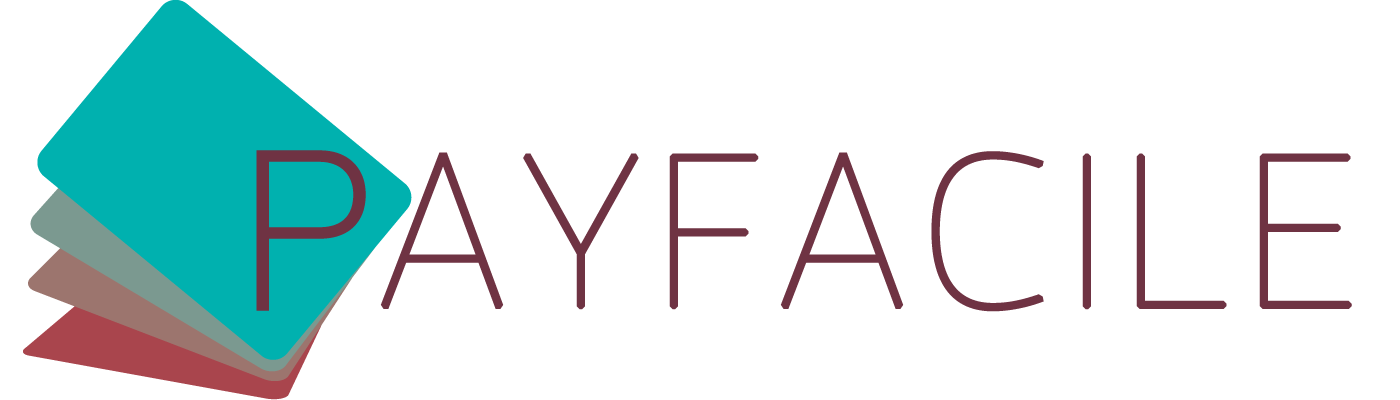
<style>
.page{position:relative;width:1400px;height:400px;background:#ffffff}
.page>*{position:absolute;margin:0}
.t1{font:220px "Acto-Hairline";letter-spacing:0.01em;color:#6f3343;font-weight:bold}
</style>
<div class="page">
<p class="t1" style="left:380px;top:151px;width:972px;height:161px">AYFACILE</p>
</div>
